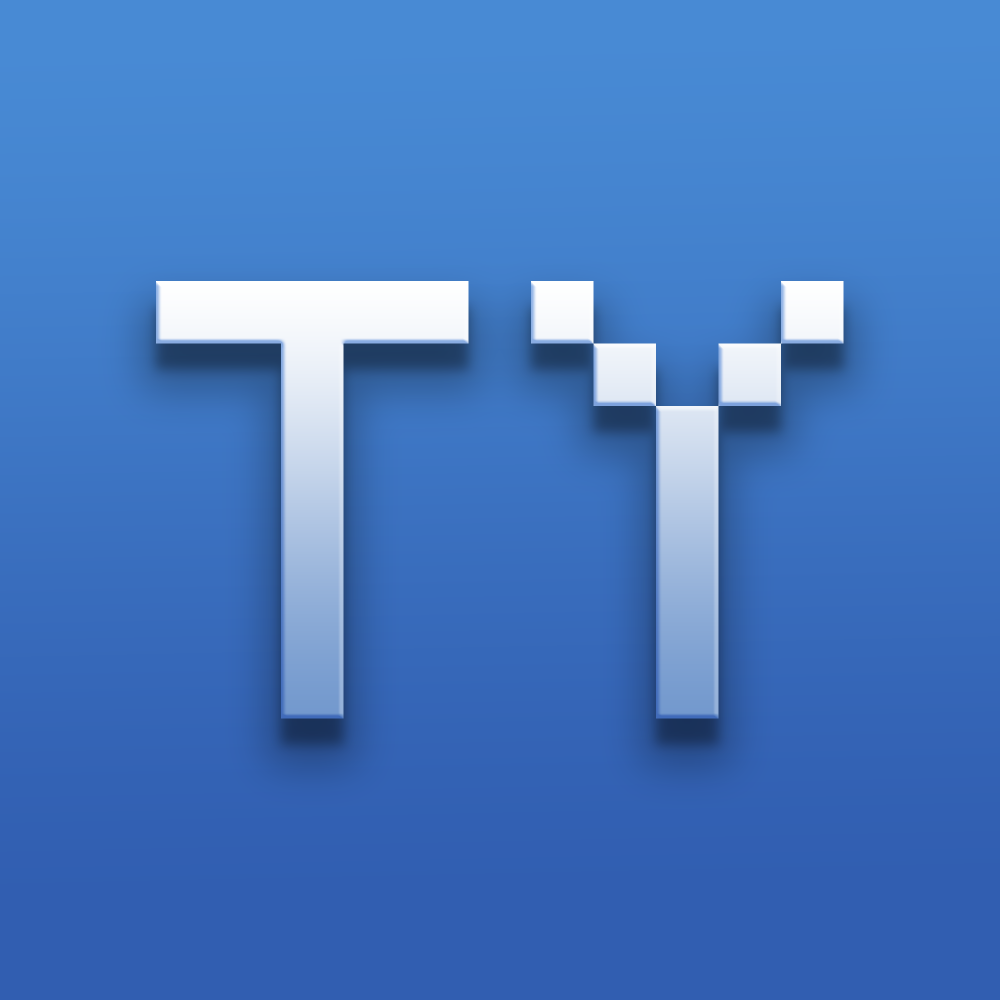
<style>
.page{position:relative;width:1000px;height:1000px}
.page>*{position:absolute;margin:0}
.t1{font:500px "Minecraftia-Regular"}
</style>
<div class="page">
<p class="t1" style="left:156px;top:281px;width:688px;height:438px">TY</p>
</div>
